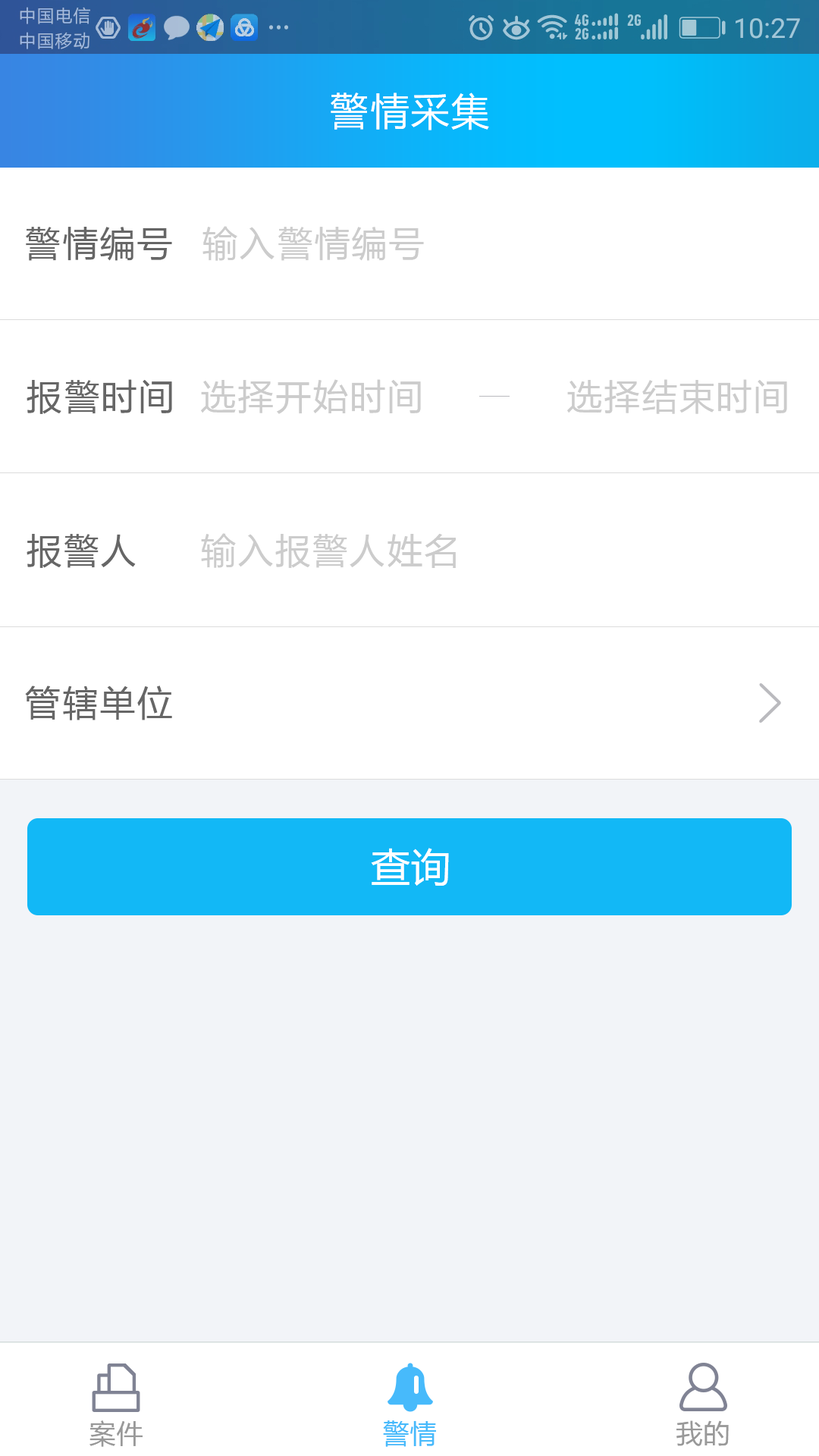
<style>
.page{position:relative;width:819px;height:1456px;background:#ffffff}
.page>*{position:absolute;margin:0}
.t1{font:39.4px "FZLTHK--GBK1-0";letter-spacing:0.025em;color:#ffffff}
.t2{font:36.4px "FZLTHK--GBK1-0";letter-spacing:0.025em;color:#666666}
.t3{font:36.4px "FZLTHK--GBK1-0";letter-spacing:0.025em;color:#cccccc}
.t4{font:39.4px "MicrosoftYaHei";letter-spacing:0.025em;color:#ffffff}
.t5{font:27.3px "FZLTHK--GBK1-0";letter-spacing:0.025em;color:#999999}
.t6{font:27.3px "FZLTHK--GBK1-0";letter-spacing:0.025em;color:#47bafb}
</style>
<div class="page">
<p class="t1" style="left:331px;top:93px;width:158px;height:37px">警情采集</p>
<p class="t2" style="left:26px;top:227px;width:146px;height:34px">警情编号</p>
<p class="t3" style="left:202px;top:226px;width:222px;height:35px">输入警情编号</p>
<p class="t2" style="left:27px;top:379px;width:145px;height:35px">报警时间</p>
<p class="t3" style="left:201px;top:379px;width:220px;height:35px">选择开始时间</p>
<p class="t3" style="left:567px;top:379px;width:220px;height:35px">选择结束时间</p>
<p class="t2" style="left:27px;top:534px;width:109px;height:34px">报警人</p>
<p class="t3" style="left:201px;top:533px;width:255px;height:35px">输入报警人姓名</p>
<p class="t2" style="left:25px;top:686px;width:147px;height:34px">管辖单位</p>
<p class="t4" style="left:371px;top:848px;width:78px;height:38px">查询</p>
<p class="t5" style="left:89px;top:1420px;width:54px;height:27px">案件</p>
<p class="t6" style="left:383px;top:1420px;width:53px;height:27px">警情</p>
<p class="t5" style="left:676px;top:1420px;width:53px;height:26px">我的</p>
</div>
